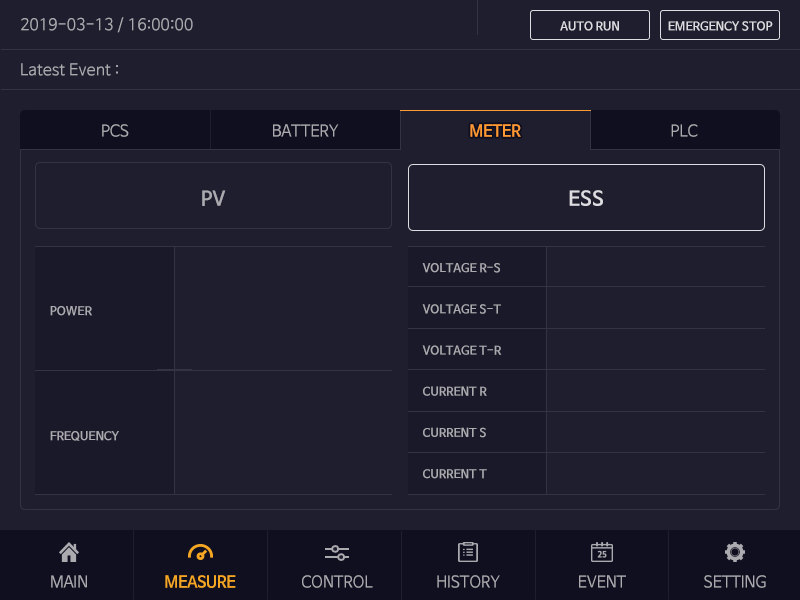
<style>
.page{position:relative;width:800px;height:600px;background:#1e1e2f}
.page>*{position:absolute;margin:0}
.t1{font:16px "NanumBarunGothic";color:#aaaaaf}
.t2{font:12px "NanumBarunGothicBold";color:#dcdce1}
.t3{font:16px "NanumBarunGothic";letter-spacing:-0.025em;color:#aaaaaf}
.t4{font:16px "NanumBarunGothicBold";letter-spacing:-0.025em;color:#ff9933}
.t5{font:20px "NanumBarunGothicBold";color:#aaaaaf}
.t6{font:20px "NanumBarunGothicBold";color:#dcdce1}
.t7{font:12px/41.2px "NanumBarunGothicBold";color:#aaaaaf}
.t8{font:12px/125px "NanumBarunGothicBold";color:#aaaaaf}
.t9{font:16px "NanumBarunGothicBold";letter-spacing:-0.025em;color:#f5a623}
</style>
<div class="page">
<p class="t1" style="left:21px;top:17px;width:172px;height:16px">2019-03-13 / 16:00:00</p>
<p class="t2" style="left:560px;top:21px;width:59px;height:10px">AUTO RUN</p>
<p class="t2" style="left:668px;top:21px;width:105px;height:10px">EMERGENCY STOP</p>
<p class="t1" style="left:21px;top:63px;width:97px;height:13px">Latest Event :</p>
<p class="t3" style="left:102px;top:124px;width:27px;height:13px">PCS</p>
<p class="t3" style="left:273px;top:124px;width:66px;height:13px">BATTERY</p>
<p class="t4" style="left:470px;top:124px;width:51px;height:13px">METER</p>
<p class="t3" style="left:671px;top:124px;width:27px;height:13px">PLC</p>
<p class="t5" style="left:202px;top:190px;width:24px;height:16px">PV</p>
<p class="t6" style="left:569px;top:190px;width:34px;height:16px">ESS</p>
<p class="t7" style="left:422px;top:263px;width:80px;height:216px">VOLTAGE R-S<br>VOLTAGE S-T<br>VOLTAGE T-R<br>CURRENT R<br>CURRENT S<br>CURRENT T</p>
<p class="t8" style="left:50px;top:306px;width:69px;height:135px">POWER<br>FREQUENCY</p>
<p class="t3" style="left:51px;top:575px;width:36px;height:13px">MAIN</p>
<p class="t9" style="left:165px;top:575px;width:71px;height:13px">MEASURE</p>
<p class="t3" style="left:302px;top:575px;width:71px;height:13px">CONTROL</p>
<p class="t3" style="left:437px;top:575px;width:63px;height:13px">HISTORY</p>
<p class="t3" style="left:579px;top:575px;width:47px;height:13px">EVENT</p>
<p class="t3" style="left:704px;top:575px;width:62px;height:13px">SETTING</p>
</div>
